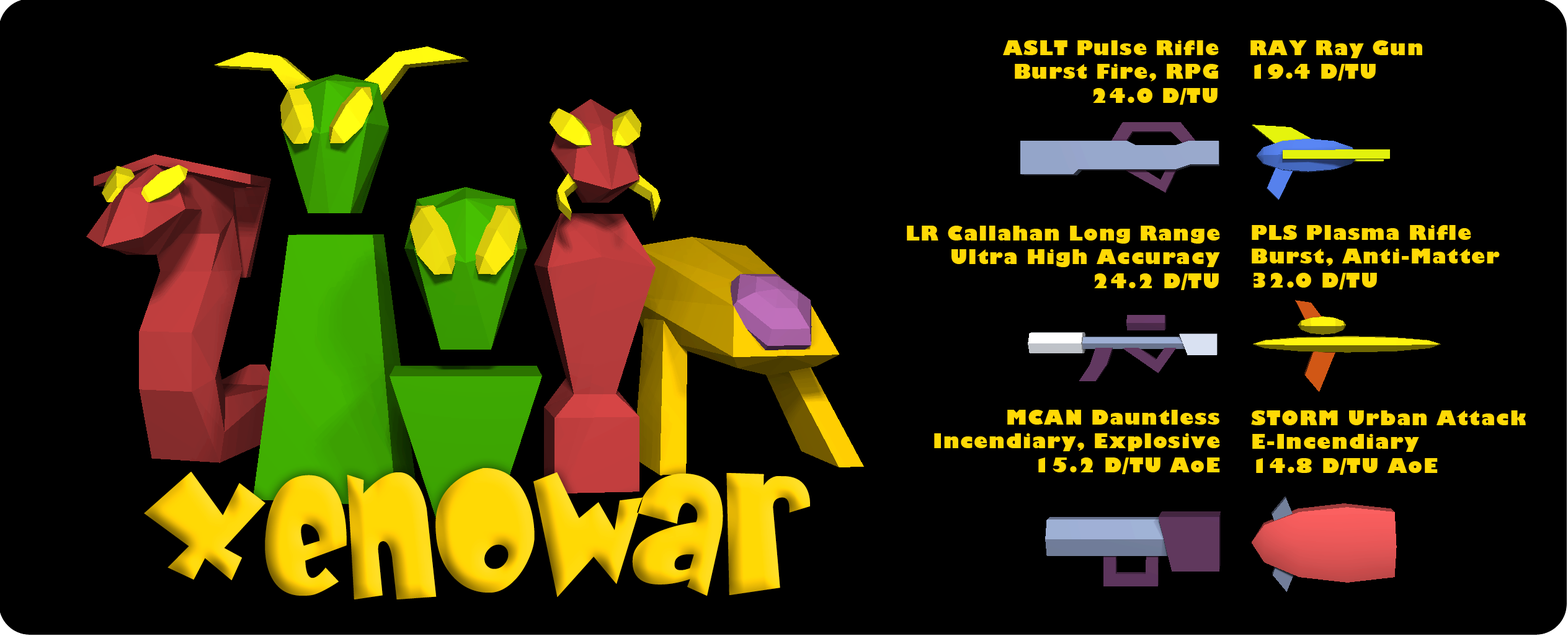
<style>
.page{position:relative;width:1568px;height:636px;background:#000000}
.page>*{position:absolute;margin:0}
.t1{font:19.8px "GillSans-UltraBold";letter-spacing:0.05em;color:#ffd905}
.t2{font:148.9px "BabyKruffy";letter-spacing:0.05em}
</style>
<div class="page">
<p class="t1" style="left:1003px;top:40px;width:216px;height:65px;text-align:right">ASLT Pulse Rifle<br>Burst Fire, RPG<br>24.0 D/TU</p>
<p class="t1" style="left:1250px;top:40px;width:172px;height:41px">RAY Ray Gun<br>19.4 D/TU</p>
<p class="t1" style="left:907px;top:226px;width:313px;height:64px;text-align:right">LR Callahan Long Range<br>Ultra High Accuracy<br>24.2 D/TU</p>
<p class="t1" style="left:1252px;top:225px;width:248px;height:65px">PLS Plasma Rifle<br>Burst, Anti-Matter<br>32.0 D/TU</p>
<p class="t1" style="left:934px;top:410px;width:286px;height:64px;text-align:right">MCAN Dauntless<br>Incendiary, Explosive<br>15.2 D/TU AoE</p>
<p class="t1" style="left:1251px;top:411px;width:275px;height:64px">STORM Urban Attack<br>E-Incendiary<br>14.8 D/TU AoE</p>
<p class="t2" style="left:144px;top:468px;width:666px;height:132px">Xenowar</p>
</div>
